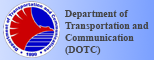
<style>
.page{position:relative;width:154px;height:60px}
.page>*{position:absolute;margin:0}
.t1{font:10px "TimesNewRomanPS-BoldMT";color:#454545}
</style>
<div class="page">
<p class="t1" style="left:65px;top:10px;width:84px;height:45px;text-align:right">Department of<br>Transportation and<br>Communication<br>(DOTC)</p>
</div>
